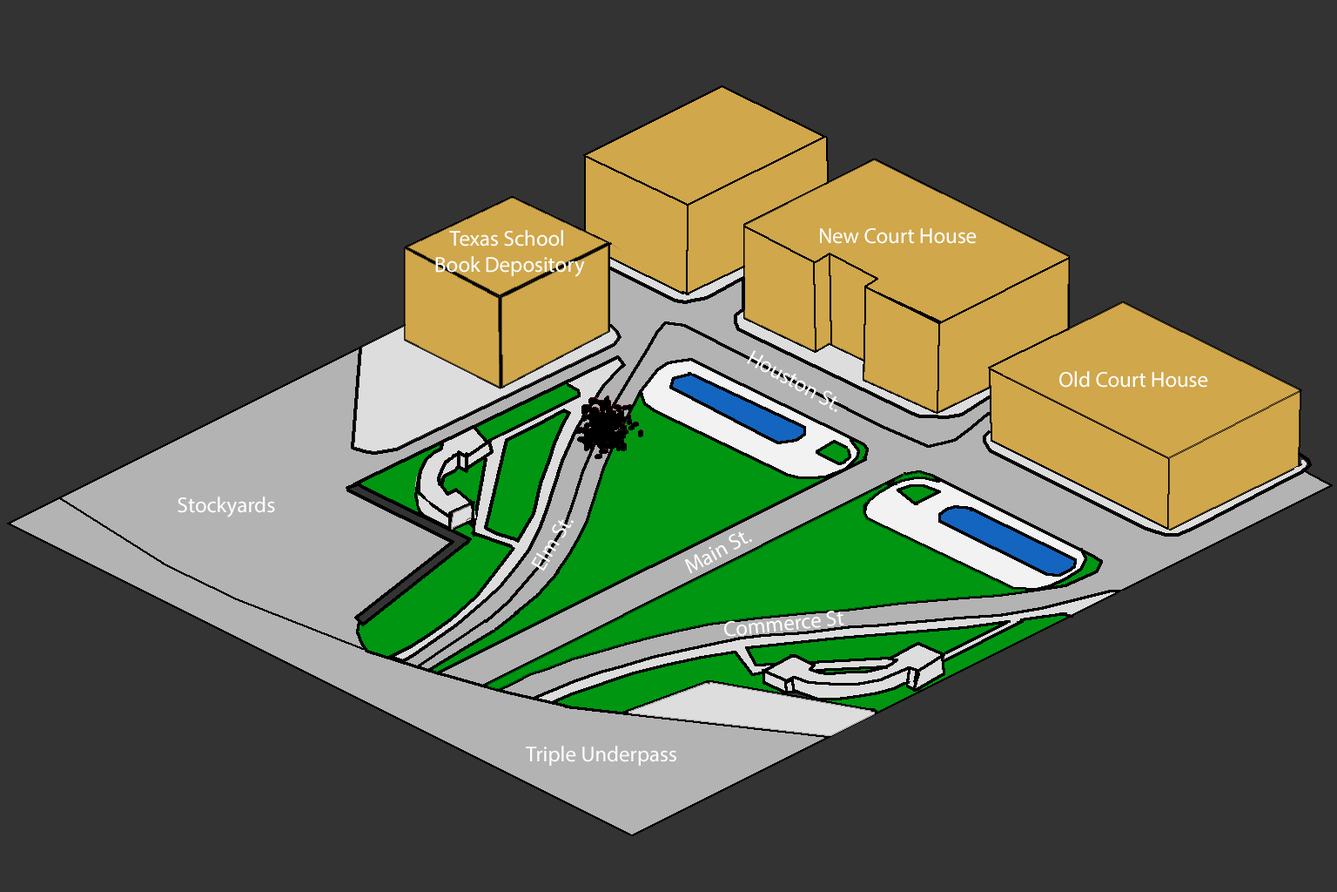
<style>
.page{position:relative;width:1337px;height:892px;background:#333333}
.page>*{position:absolute;margin:0}
.t1{font:21.7px "MyriadPro-Regular";color:#ffffff}
</style>
<div class="page">
<p class="t1" style="left:435px;top:230px;width:150px;height:47px;text-align:center">Texas School <br>Book Depository</p>
<p class="t1" style="left:820px;top:228px;width:157px;height:16px">New Court House</p>
<p class="t1" style="left:1060px;top:371px;width:149px;height:16px">Old Court House</p>
<p class="t1" style="left:178px;top:496px;width:97px;height:21px">Stockyards</p>
<p class="t1" style="left:531px;top:519px;width:43px;height:52px;rotate:-59deg">Elm St.</p>
<p class="t1" style="left:684px;top:531px;width:68px;height:43px;rotate:-28deg">Main St.</p>
<p class="t1" style="left:724px;top:610px;width:121px;height:26px;rotate:-6deg">Commerce St</p>
</div>
